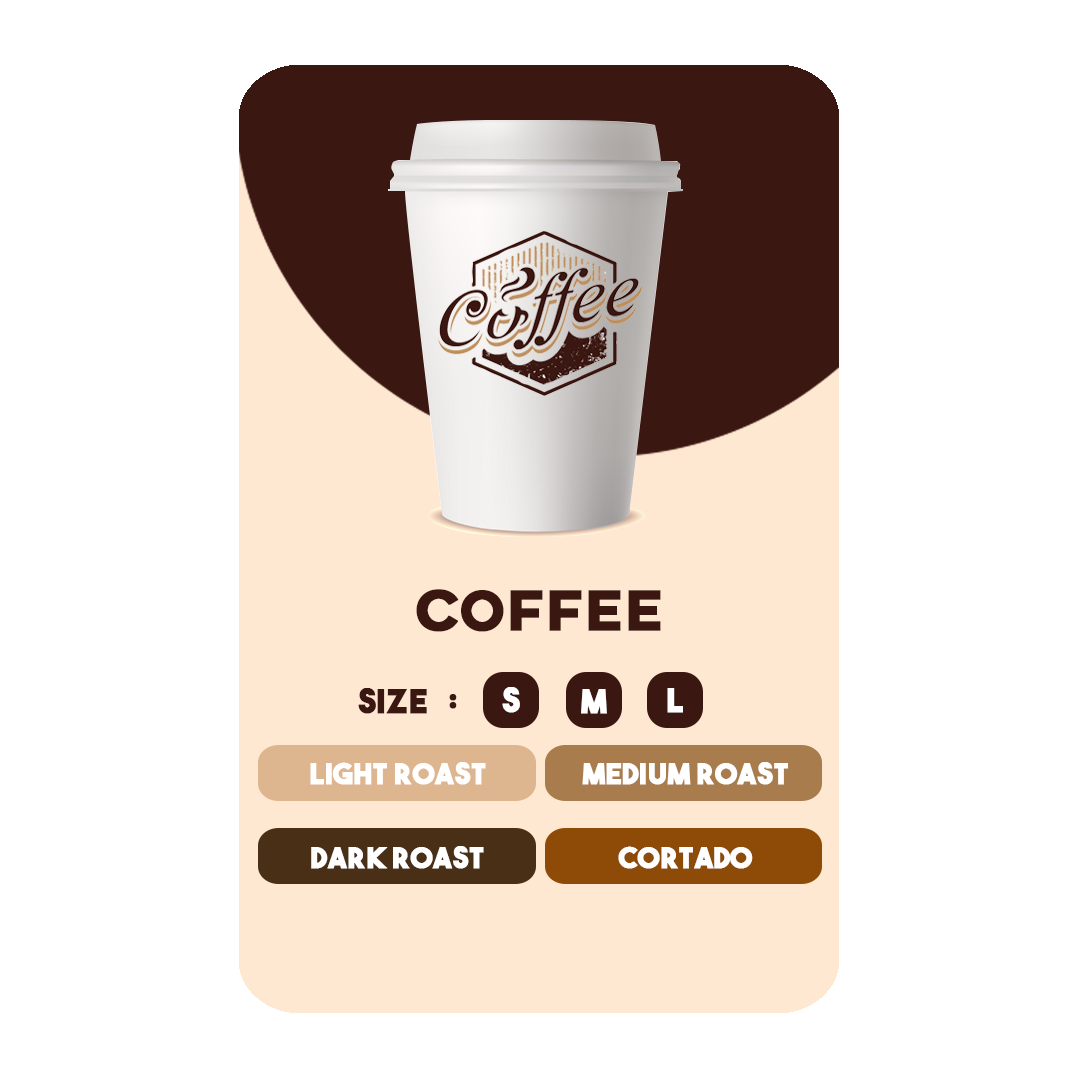
<style>
.page{position:relative;width:1080px;height:1080px;background:#ffffff}
.page>*{position:absolute;margin:0}
.t1{font:58.4px "AXIS-ExtraBold";color:#3a1711;font-weight:bold}
.t2{font:33.4px "TheBoldFont";color:#3a1711;font-weight:bold}
.t3{font:33.3px "TheBoldFont";color:#ffffff;font-weight:bold}
.t4{font:29px "TheBoldFont";color:#ffffff;font-weight:bold}
</style>
<div class="page">
<p class="t1" style="left:416px;top:589px;width:245px;height:43px">COFFEE</p>
<p class="t2" style="left:358px;top:688px;width:99px;height:26px">SIZE   :</p>
<p class="t3" style="left:502px;top:687px;width:18px;height:26px">S</p>
<p class="t3" style="left:581px;top:689px;width:26px;height:25px">M</p>
<p class="t3" style="left:667px;top:688px;width:16px;height:25px">L</p>
<p class="t4" style="left:310px;top:762px;width:176px;height:23px">LIGHT ROAST</p>
<p class="t4" style="left:582px;top:762px;width:206px;height:23px">MEDIUM ROAST</p>
<p class="t4" style="left:311px;top:846px;width:173px;height:23px">DARK ROAST</p>
<p class="t4" style="left:618px;top:846px;width:135px;height:23px">CORTADO</p>
</div>
